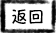
<style>
.page{position:relative;width:56px;height:33px;background:#ffffff}
.page>*{position:absolute;margin:0}
.t1{font:16px "HannotateSC-W7";letter-spacing:0.055em;color:#000000}
</style>
<div class="page">
<p class="t1" style="left:12px;top:9px;width:31px;height:15px">返回</p>
</div>
